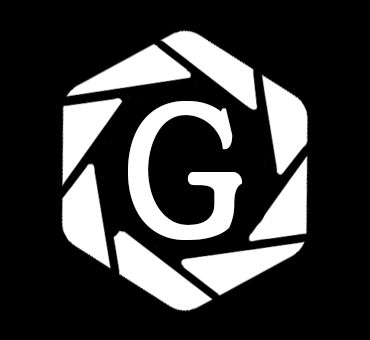
<style>
.page{position:relative;width:370px;height:340px;background:#000000}
.page>*{position:absolute;margin:0}
.t1{font:213px "A0DestaUnicode";color:#ffffff;scale:0.9 1}
</style>
<div class="page">
<p class="t1" style="left:128px;top:101px;width:115px;height:139px">G</p>
</div>
